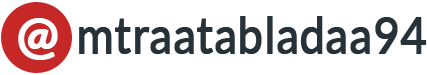
<style>
.page{position:relative;width:427px;height:75px;background:#ffffff}
.page>*{position:absolute;margin:0}
.t1{font:50px "Lato-Regular";color:#263238;font-weight:bold;scale:0.9 1}
.t2{font:50px "Lato-Bold";color:#ffffff;font-weight:bold}
</style>
<div class="page">
<p class="t1" style="left:79px;top:16px;width:348px;height:38px">mtraatabladaa94</p>
<p class="t2" style="left:18px;top:18px;width:40px;height:42px">@</p>
</div>
